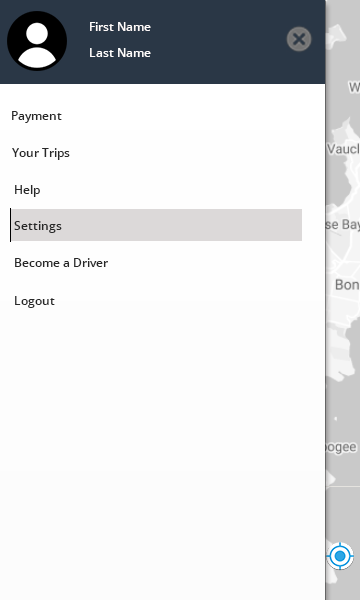
<style>
.page{position:relative;width:360px;height:600px;background:#fdfdfd}
.page>*{position:absolute;margin:0}
.t1{font:12px "OpenSans-Semibold";color:#fefcfc}
.t2{font:12px "OpenSans-Semibold";color:#fefdfd}
.t3{font:12px "OpenSans-Semibold";color:#282828}
</style>
<div class="page">
<p class="t1" style="left:90px;top:22px;width:61px;height:9px">First Name</p>
<p class="t2" style="left:90px;top:48px;width:61px;height:9px">Last Name</p>
<p class="t3" style="left:12px;top:111px;width:50px;height:12px">Payment</p>
<p class="t3" style="left:12px;top:148px;width:58px;height:12px">Your Trips</p>
<p class="t3" style="left:15px;top:185px;width:25px;height:12px">Help</p>
<p class="t3" style="left:14px;top:221px;width:48px;height:12px">Settings</p>
<p class="t3" style="left:15px;top:258px;width:93px;height:9px">Become a Driver</p>
<p class="t3" style="left:15px;top:296px;width:40px;height:12px">Logout</p>
</div>
